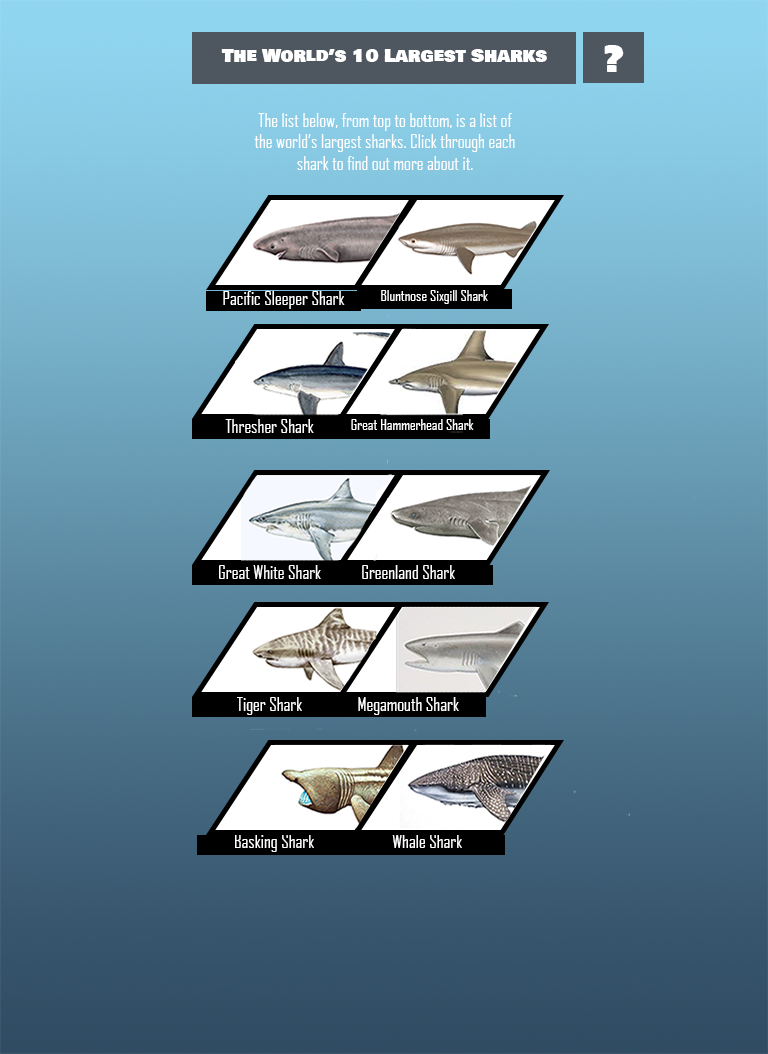
<style>
.page{position:relative;width:768px;height:1054px}
.page>*{position:absolute;margin:0}
.t1{font:18px "BowlbyOneSC-Regular";color:#ffffff}
.t2{font:36px "BowlbyOneSC-Regular";color:#ffffff}
.t3{font:18px "AgencyFB-Reg";color:#ffffff}
.t4{font:15px "AgencyFB-Reg";color:#ffffff}
</style>
<div class="page">
<p class="t1" style="left:221px;top:49px;width:326px;height:13px">The World’s 10 Largest Sharks</p>
<p class="t2" style="left:604px;top:45px;width:20px;height:27px">?</p>
<p class="t3" style="left:254px;top:113px;width:261px;height:57px;text-align:center">The list below, from top to bottom, is a list of the world’s largest sharks. Click through each shark to find out more about it.</p>
<p class="t3" style="left:223px;top:291px;width:122px;height:18px">Pacific Sleeper Shark</p>
<p class="t4" style="left:381px;top:290px;width:107px;height:14px">Bluntnose Sixgill Shark</p>
<p class="t3" style="left:225px;top:419px;width:89px;height:14px">Thresher Shark</p>
<p class="t4" style="left:351px;top:419px;width:123px;height:11px">Great Hammerhead Shark</p>
<p class="t3" style="left:219px;top:565px;width:102px;height:14px">Great White Shark</p>
<p class="t3" style="left:362px;top:565px;width:93px;height:14px">Greenland Shark</p>
<p class="t3" style="left:237px;top:697px;width:65px;height:18px">Tiger Shark</p>
<p class="t3" style="left:358px;top:697px;width:101px;height:18px">Megamouth Shark</p>
<p class="t3" style="left:235px;top:834px;width:79px;height:18px">Basking Shark</p>
<p class="t3" style="left:392px;top:834px;width:70px;height:14px">Whale Shark</p>
</div>
